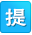
<style>
.page{position:relative;width:32px;height:35px;background:#1ab7fa}
.page>*{position:absolute;margin:0}
.t1{font:22px "FZHLJW--GB1-0";letter-spacing:0.2em;color:#ffffff}
.t2{font:22px "FZHLJW--GB1-0";letter-spacing:0.2em}
</style>
<div class="page">
<p class="t1" style="left:5px;top:8px;width:21px;height:18px">提</p>
<p class="t2" style="left:6px;top:9px;width:21px;height:18px">提</p>
</div>
